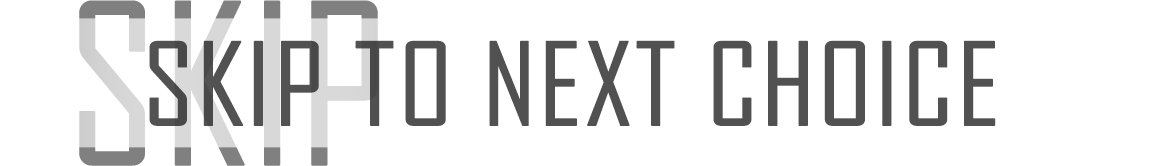
<style>
.page{position:relative;width:1156px;height:166px;background:#ffffff}
.page>*{position:absolute;margin:0}
.t1{font:214px "AgencyFB-Reg";text-transform:uppercase;font-weight:bold}
.t2{font:110px "AgencyFB-Reg";color:#515151;text-transform:uppercase;font-weight:bold;scale:1.1 1}
</style>
<div class="page">
<p class="t1" style="left:79px;top:0px;width:299px;height:166px">skip</p>
<p class="t2" style="left:149px;top:40px;width:847px;height:86px">Skip to next choice</p>
</div>
